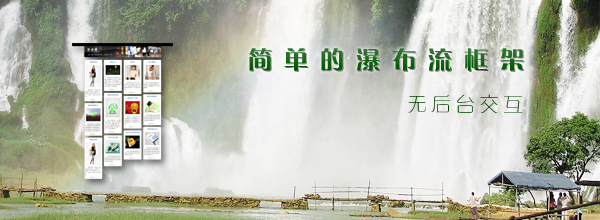
<style>
.page{position:relative;width:600px;height:220px}
.page>*{position:absolute;margin:0}
.t1{font:24px "FZCQJW--GB1-0";letter-spacing:0.5em;color:#186518}
.t2{font:20px "FZXQJW--GB1-0";letter-spacing:0.2em;color:#004400}
</style>
<div class="page">
<p class="t1" style="left:249px;top:48px;width:275px;height:23px">简单的瀑布流框架</p>
<p class="t2" style="left:408px;top:94px;width:115px;height:20px">无后台交互</p>
</div>
